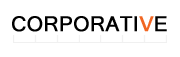
<style>
.page{position:relative;width:180px;height:57px;background:#ffffff}
.page>*{position:absolute;margin:0}
.t1{font:20px "Mangal";color:#000000;text-transform:uppercase;font-weight:bold}
.t2{font:20px "Mangal";color:#f16622;text-transform:uppercase;font-weight:bold}
</style>
<div class="page">
<p class="t1" style="left:12px;top:16px;width:155px;height:16px">Corporati<span class="t2">v</span>e</p>
</div>
